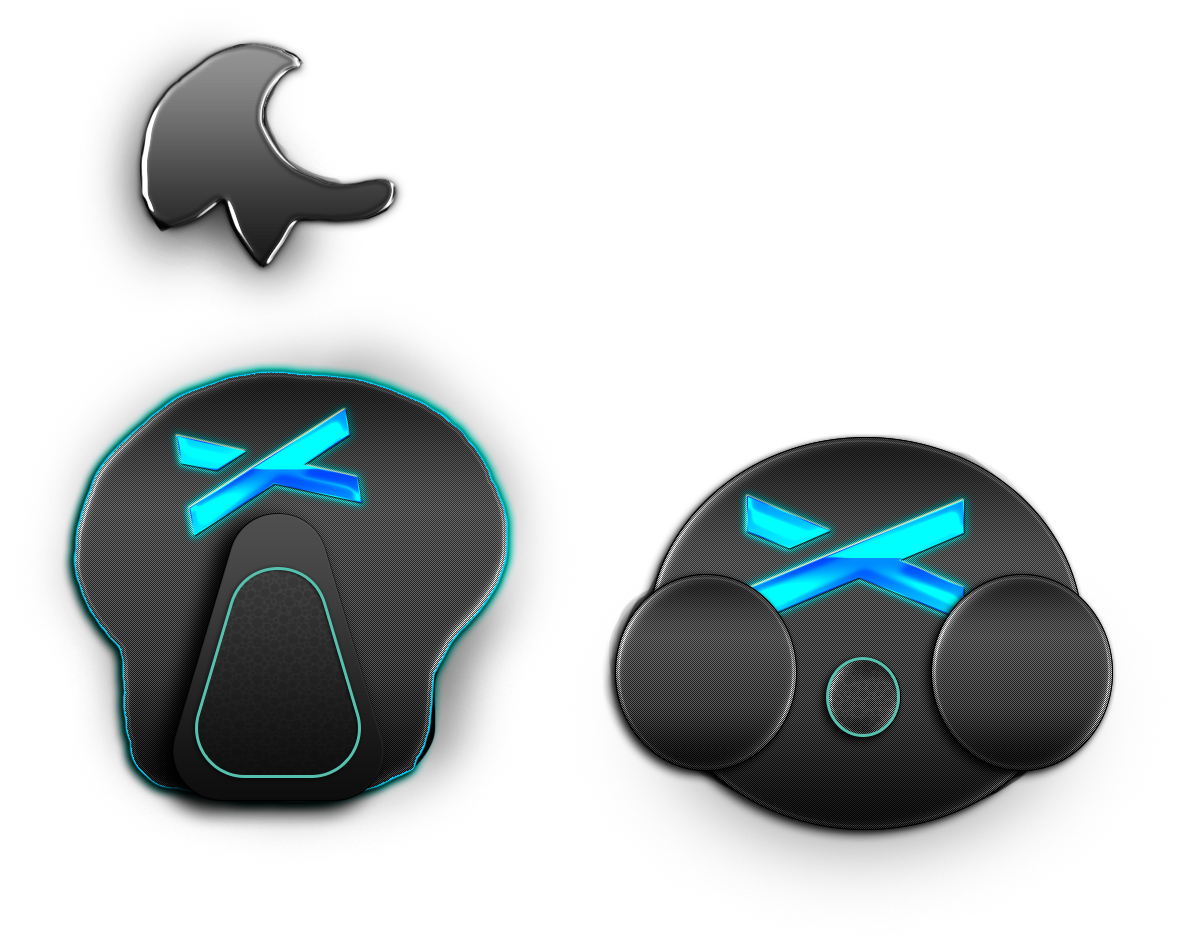
<style>
.page{position:relative;width:1182px;height:942px;background:#ffffff}
.page>*{position:absolute;margin:0}
.t1{font:243.8px "Brolink-Regular";scale:0.53 1}
.t2{font:310.5px "Brolink-Regular";scale:0.53 1}
</style>
<div class="page">
<p class="t1" style="left:176px;top:409px;width:186px;height:127px;rotate:80deg">x</p>
<p class="t2" style="left:747px;top:495px;width:217px;height:130px;rotate:90deg">x</p>
</div>
